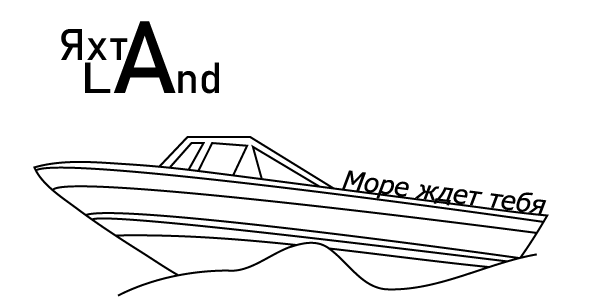
<style>
.page{position:relative;width:606px;height:300px;background:#ffffff}
.page>*{position:absolute;margin:0}
.t1{font:43.1px "Bahnschrift";color:#000000}
.t2{font:101.2px "Bahnschrift";color:#000000}
.t3{font:43.1px "Bahnschrift";color:#000000;scale:1.29 1}
</style>
<div class="page">
<p class="t1" style="left:61px;top:29px;width:67px;height:31px">Яхт</p>
<p class="t2" style="left:113px;top:21px;width:63px;height:72px">А</p>
<p class="t3" style="left:85px;top:62px;width:26px;height:31px">L</p>
<p class="t1" style="left:178px;top:62px;width:41px;height:32px">nd</p>
</div>
